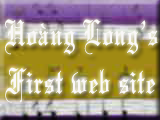
<style>
.page{position:relative;width:160px;height:120px}
.page>*{position:absolute;margin:0}
.t1{font:40.1px "VNI-Maria";color:#faf8f8;scale:0.8 1}
</style>
<div class="page">
<p class="t1" style="left:5px;top:19px;width:153px;height:84px;text-align:center">Hoaøng Long’s<br>First web site</p>
</div>
